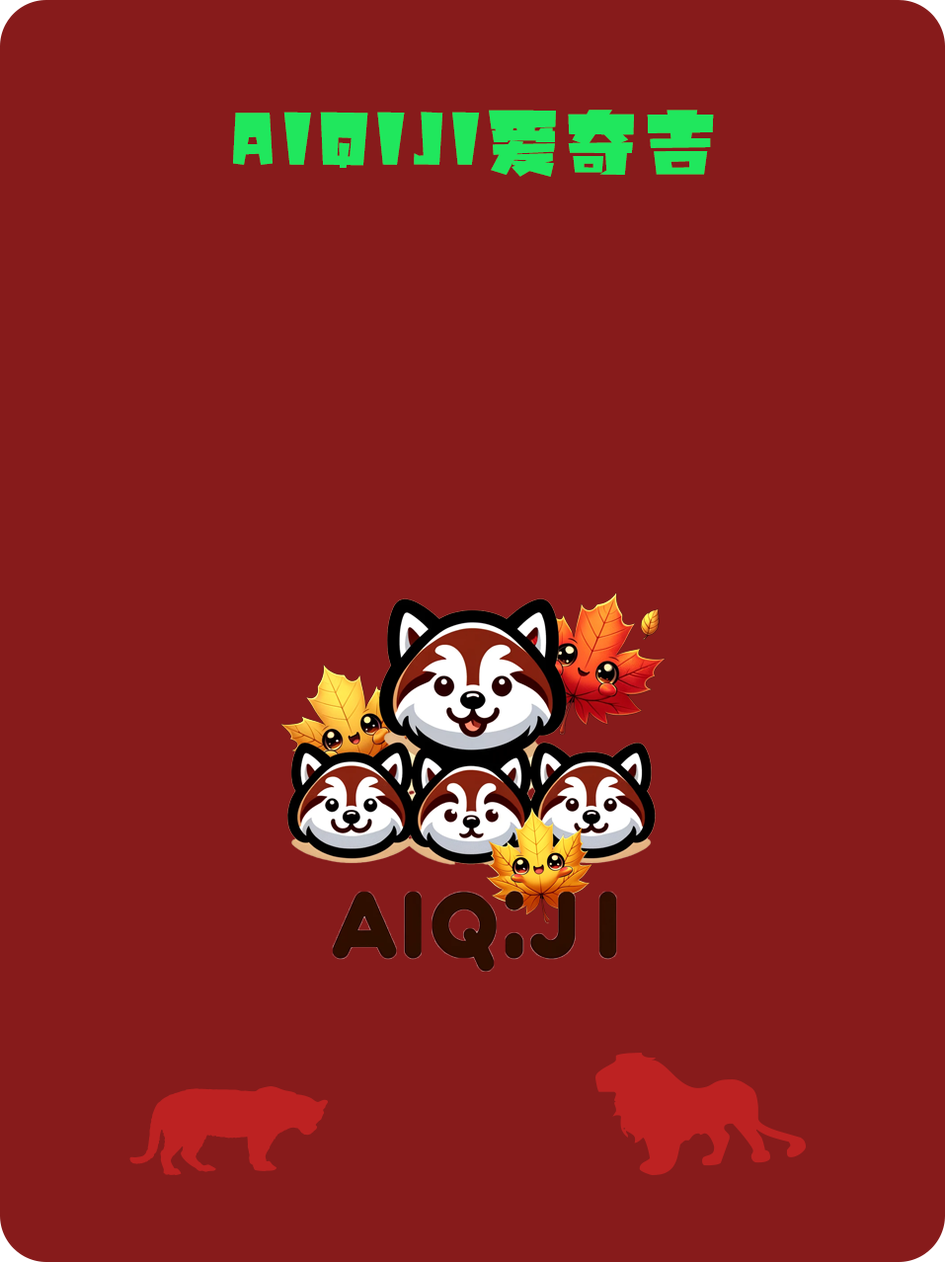
<style>
.page{position:relative;width:945px;height:1262px;background:#871b1b}
.page>*{position:absolute;margin:0}
.t1{font:74.1px "zihun18hao-xiaokonglong";letter-spacing:0.04em;color:#20e75d}
</style>
<div class="page">
<p class="t1" style="left:233px;top:110px;width:481px;height:67px">AIQIJI爱奇吉</p>
</div>
